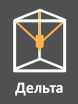
<style>
.page{position:relative;width:78px;height:104px;background:#505050}
.page>*{position:absolute;margin:0}
.t1{font:12px "Calibri-Bold";color:#ffffff}
</style>
<div class="page">
<p class="t1" style="left:15px;top:82px;width:48px;height:14px">Дельта</p>
</div>
